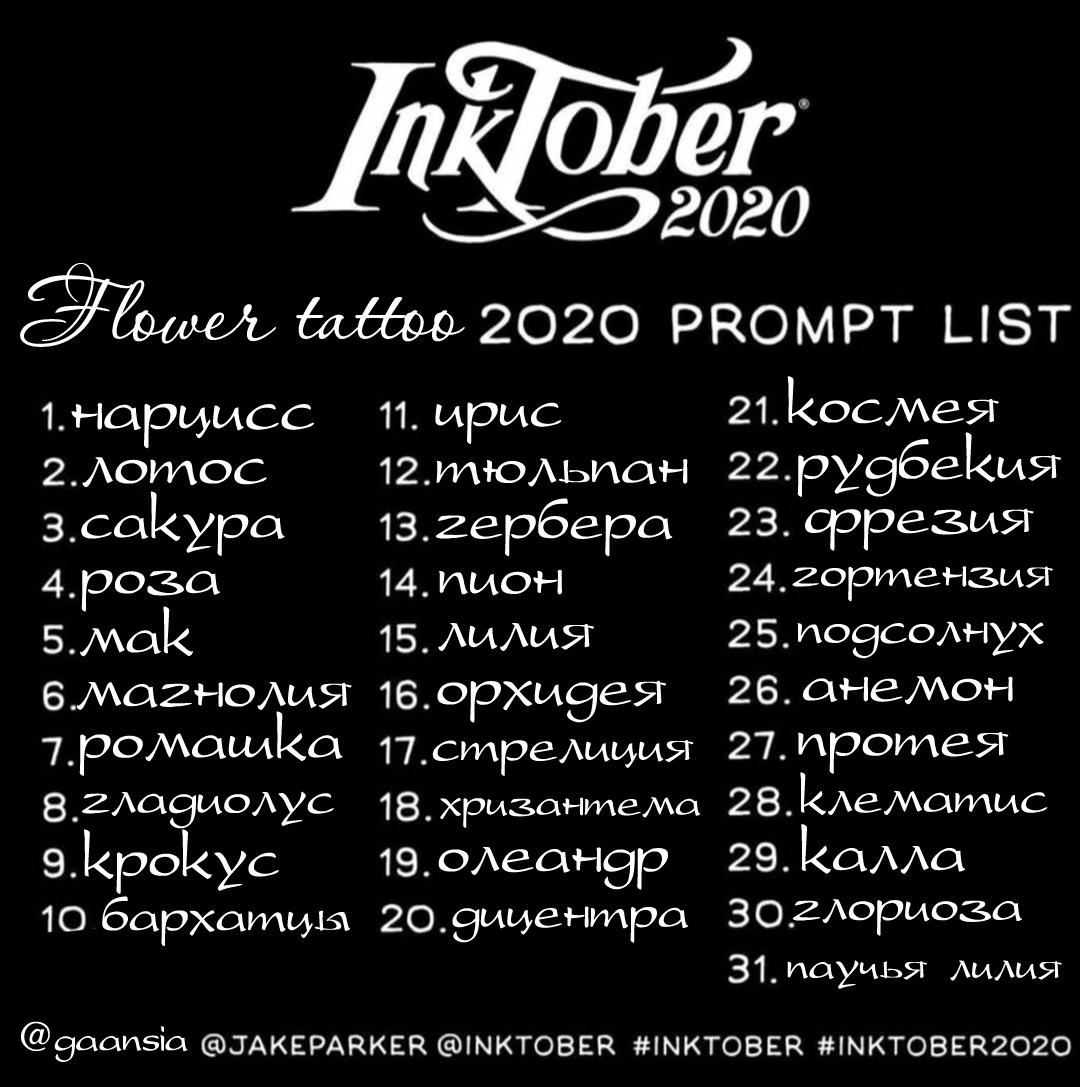
<style>
.page{position:relative;width:1080px;height:1087px;background:#010101}
.page>*{position:absolute;margin:0}
.t1{font:85px "Aquarelle";color:#ffffff}
.t2{font:70px "PresentScript_cyr";color:#ffffff}
.t3{font:75px "PresentScript_cyr";color:#ffffff}
.t4{font:58px "PresentScript_cyr";color:#ffffff}
.t5{font:60px "PresentScript_cyr";color:#ffffff}
.t6{font:50px "PresentScript_cyr";color:#ffffff}
.t7{font:45px "PresentScript_cyr";color:#ffffff}
</style>
<div class="page">
<p class="t1" style="left:20px;top:263px;width:445px;height:84px">Flower tattoo</p>
<p class="t2" style="left:787px;top:376px;width:212px;height:50px">космея</p>
<p class="t3" style="left:71px;top:403px;width:243px;height:46px">нарцисс</p>
<p class="t2" style="left:435px;top:402px;width:127px;height:42px">ирис</p>
<p class="t2" style="left:797px;top:432px;width:264px;height:65px">рудбекия</p>
<p class="t3" style="left:82px;top:457px;width:185px;height:31px">лотос</p>
<p class="t2" style="left:436px;top:458px;width:252px;height:29px">тюльпан</p>
<p class="t2" style="left:81px;top:491px;width:204px;height:65px">сакура</p>
<p class="t2" style="left:435px;top:498px;width:238px;height:59px">гербера</p>
<p class="t2" style="left:805px;top:508px;width:229px;height:43px">фрезия</p>
<p class="t2" style="left:439px;top:569px;width:123px;height:27px">пион</p>
<p class="t4" style="left:792px;top:566px;width:261px;height:36px">гортензия</p>
<p class="t2" style="left:81px;top:570px;width:139px;height:42px">роза</p>
<p class="t2" style="left:80px;top:606px;width:113px;height:51px">мак</p>
<p class="t2" style="left:438px;top:623px;width:156px;height:28px">лилия</p>
<p class="t5" style="left:797px;top:621px;width:247px;height:38px">подсолнух</p>
<p class="t2" style="left:803px;top:676px;width:210px;height:29px">анемон</p>
<p class="t2" style="left:77px;top:682px;width:275px;height:28px">магнолия</p>
<p class="t2" style="left:437px;top:680px;width:229px;height:43px">орхидея</p>
<p class="t2" style="left:79px;top:711px;width:264px;height:65px">ромашка</p>
<p class="t2" style="left:798px;top:732px;width:211px;height:42px">протея</p>
<p class="t5" style="left:432px;top:739px;width:262px;height:37px">стрелиция</p>
<p class="t5" style="left:800px;top:772px;width:248px;height:43px">клематис</p>
<p class="t5" style="left:81px;top:791px;width:253px;height:38px">гладиолус</p>
<p class="t6" style="left:440px;top:797px;width:261px;height:31px">хризантема</p>
<p class="t2" style="left:84px;top:829px;width:195px;height:65px">крокус</p>
<p class="t2" style="left:801px;top:824px;width:165px;height:50px">калла</p>
<p class="t2" style="left:438px;top:847px;width:230px;height:43px">олеандр</p>
<p class="t5" style="left:102px;top:896px;width:248px;height:50px">бархатцы</p>
<p class="t5" style="left:793px;top:899px;width:229px;height:37px">глориоза</p>
<p class="t5" style="left:452px;top:906px;width:237px;height:37px">дицентра</p>
<p class="t6" style="left:787px;top:960px;width:275px;height:29px">паучья лилия</p>
<p class="t7" style="left:21px;top:1021px;width:167px;height:41px">@gaansia</p>
</div>
